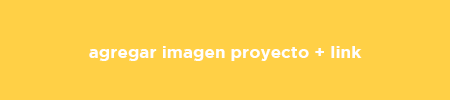
<style>
.page{position:relative;width:450px;height:100px;background:#ffd046}
.page>*{position:absolute;margin:0}
.t1{font:17px "Gotham-Bold";color:#fefefe}
</style>
<div class="page">
<p class="t1" style="left:89px;top:46px;width:273px;height:15px">agregar imagen proyecto + link</p>
</div>
